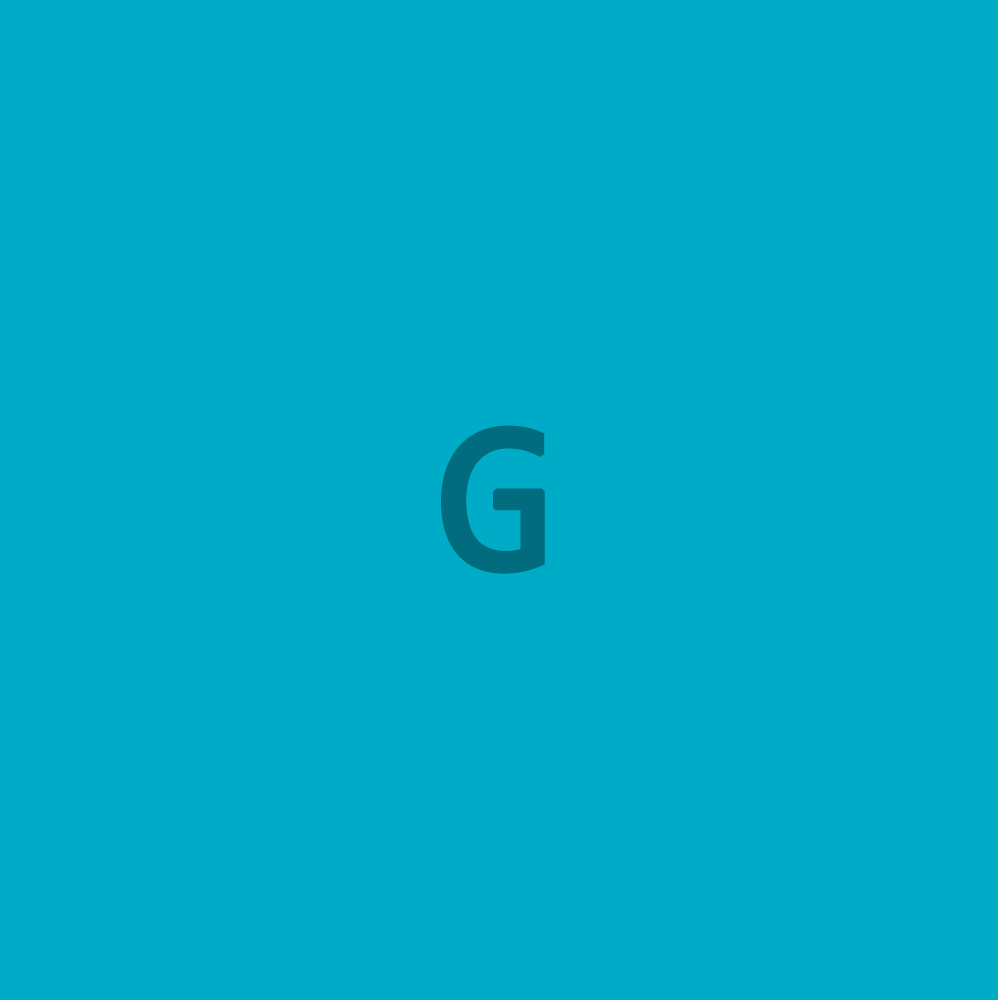
<style>
.page{position:relative;width:1000px;height:1000px;background:#00abc7}
.page>*{position:absolute;margin:0}
.t1{font:216.7px "Consolas";color:#006c7e;font-weight:bold}
</style>
<div class="page">
<p class="t1" style="left:441px;top:425px;width:104px;height:149px">G</p>
</div>
